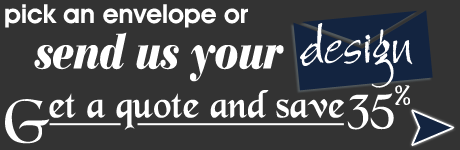
<style>
.page{position:relative;width:460px;height:150px;background:#333333}
.page>*{position:absolute;margin:0}
.t1{font:26px "AvantGardeITCbyBT-Demi";color:#ffffff}
.t2{font:53px "BergellLetPlain";color:#ffffff}
.t3{font:51.7px "BauerBodoniBT-BlackItalic";color:#ffffff;scale:0.82 1}
.t4{font:41px "BlackChancery";color:#ffffff}
.t5{font:53px "BlackChancery";letter-spacing:-0.02em;color:#ffffff}
.t6{font:41px "BlackChancery";letter-spacing:0.06em;color:#ffffff}
.t7{font:53px "BlackChancery";color:#ffffff}
.t8{font:34px "BlackChancery";color:#ffffff}
</style>
<div class="page">
<p class="t1" style="left:5px;top:4px;width:243px;height:24px">pick an envelope or</p>
<p class="t2" style="left:300px;top:23px;width:113px;height:65px">design</p>
<p class="t3" style="left:34px;top:32px;width:250px;height:50px">send us your</p>
<p class="t4" style="left:5px;top:85px;width:405px;height:59px"><span class="t5">G</span>et a quote and sav<span class="t6">e</span><span class="t7">35</span><span class="t8">%</span></p>
</div>
